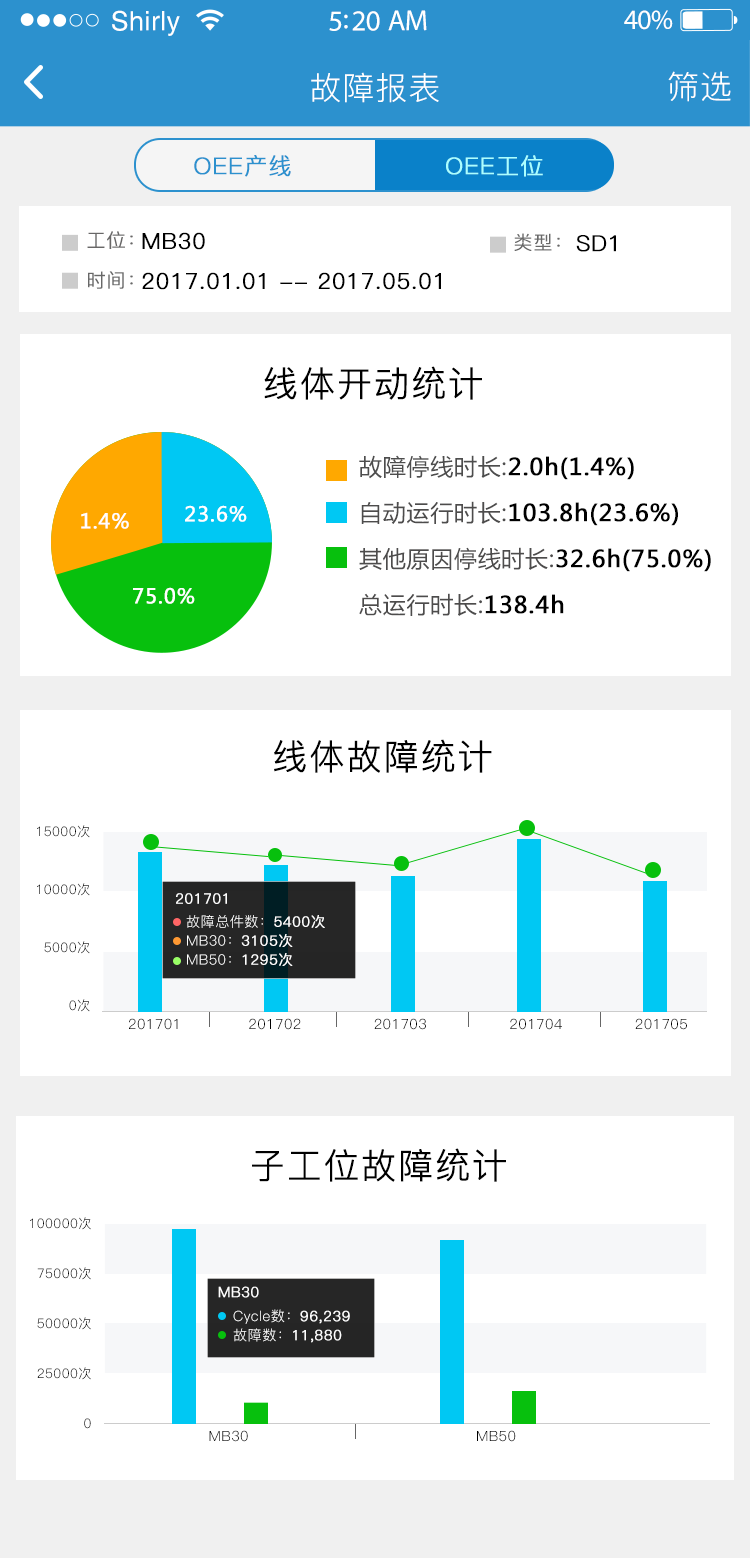
<style>
.page{position:relative;width:750px;height:1558px;background:#ffffff}
.page>*{position:absolute;margin:0}
.t1{font:26.8px "Helvetica";letter-spacing:0.02em;color:#ffffff}
.t2{font:29.1px "MyriadPro-Regular";letter-spacing:-0.02em;color:#ffffff}
.t3{font:27.9px "MyriadPro-Regular";letter-spacing:-0.02em;color:#ffffff}
.t4{font:32px "PingFang-SC-Regular";letter-spacing:0.03em;color:#ffffff}
.t5{font:19px/20px "PingFang-SC-Regular";letter-spacing:0.03em;color:#686767;font-weight:bold}
.t6{font:19px/20px "PingFang-SC-Regular";letter-spacing:0.03em;color:#686868;font-weight:bold}
.t7{font:22px/20px "PingFang-SC-Regular";letter-spacing:0.03em;color:#000000;font-weight:bold}
.t8{font:19px "PingFang-SC-Regular";letter-spacing:0.03em;color:#686868;font-weight:bold}
.t9{font:22px "PingFang-SC-Regular";letter-spacing:0.03em;color:#000000;font-weight:bold}
.t10{font:35px "PingFang-SC-Regular";letter-spacing:0.03em;color:#000000;font-weight:bold}
.t11{font:23px/23px "MicrosoftYaHei";letter-spacing:0.03em;color:#000000;font-weight:bold}
.t12{font:23px/23px "MicrosoftYaHei";letter-spacing:0.03em;color:#4d4d4d}
.t13{font:23px/23px "MicrosoftYaHei";letter-spacing:0.03em;color:#4d4c4c}
.t14{font:20px "MicrosoftYaHei";letter-spacing:0.03em;color:#ffffff;font-weight:bold}
.t15{font:13.2px/29px "PingFang-SC-Regular";letter-spacing:0.03em;color:#000000}
.t16{font:14.2px "PingFang-SC-Regular";letter-spacing:0.03em;color:#ffffff;font-weight:bold}
.t17{font:14.2px/19px "PingFang-SC-Regular";letter-spacing:0.03em;color:#ffffff}
.t18{font:14.2px/19px "PingFang-SC-Regular";letter-spacing:0.03em;color:#ffffff;font-weight:bold}
.t19{font:14.2px "PingFang-SC-Regular";letter-spacing:0.03em;color:#000000}
.t20{font:13.2px/25px "PingFang-SC-Regular";letter-spacing:0.03em;color:#000000}
</style>
<div class="page">
<p class="t1" style="left:112px;top:10px;width:68px;height:26px">Shirly</p>
<p class="t2" style="left:329px;top:10px;width:98px;height:21px">5:20 AM</p>
<p class="t3" style="left:624px;top:10px;width:49px;height:20px">40%</p>
<p class="t4" style="left:311px;top:72px;width:128px;height:31px">故障报表</p>
<p class="t4" style="left:668px;top:71px;width:63px;height:31px">筛选</p>
<p class="t5" style="left:87px;top:231px;width:46px;height:58px;text-align:right">工位：<br><br><span class="t6">时间：</span></p>
<p class="t7" style="left:142px;top:232px;width:299px;height:58px">MB30<br><br>2017.01.01 -- 2017.05.01</p>
<p class="t8" style="left:514px;top:233px;width:46px;height:18px">类型：</p>
<p class="t9" style="left:576px;top:235px;width:40px;height:17px">SD1</p>
<p class="t10" style="left:264px;top:366px;width:218px;height:34px">线体开动统计</p>
<p class="t11" style="left:359px;top:455px;width:352px;height:161px"><span class="t12">故障停线时长:</span>2.0h(1.4%)<br><br><span class="t13">自动运行时长:</span>103.8h(23.6%)<br><br><span class="t13">其他原因停线时长:</span>32.6h(75.0%)<br><br><span class="t13">总运行时长:</span>138.4h</p>
<p class="t14" style="left:185px;top:505px;width:62px;height:17px">23.6%</p>
<p class="t14" style="left:81px;top:512px;width:48px;height:17px">1.4%</p>
<p class="t14" style="left:133px;top:587px;width:62px;height:17px">75.0%</p>
<p class="t10" style="left:274px;top:739px;width:218px;height:34px">线体故障统计</p>
<p class="t15" style="left:37px;top:825px;width:53px;height:187px;text-align:right">15000次<br><br>10000次<br><br>5000次<br><br>0次</p>
<p class="t16" style="left:176px;top:893px;width:51px;height:11px">201701</p>
<p class="t17" style="left:186px;top:915px;width:139px;height:51px">故障总件数：<span class="t18">5400次<br></span>MB30：<span class="t18">3105次<br></span>MB50：<span class="t18">1295次</span></p>
<p class="t19" style="left:129px;top:1018px;width:558px;height:12px">201701             201702              201703                201704              201705</p>
<p class="t10" style="left:252px;top:1148px;width:254px;height:34px">子工位故障统计</p>
<p class="t20" style="left:30px;top:1217px;width:61px;height:212px;text-align:right">100000次<br><br>75000次<br><br>50000次<br><br>25000次<br><br>0</p>
<p class="t16" style="left:218px;top:1286px;width:41px;height:12px">MB30</p>
<p class="t17" style="left:233px;top:1309px;width:117px;height:34px">Cycle数：<span class="t18">96,239<br></span>故障数：<span class="t18">11,880</span></p>
<p class="t19" style="left:209px;top:1430px;width:307px;height:12px">MB30                    MB50</p>
</div>
